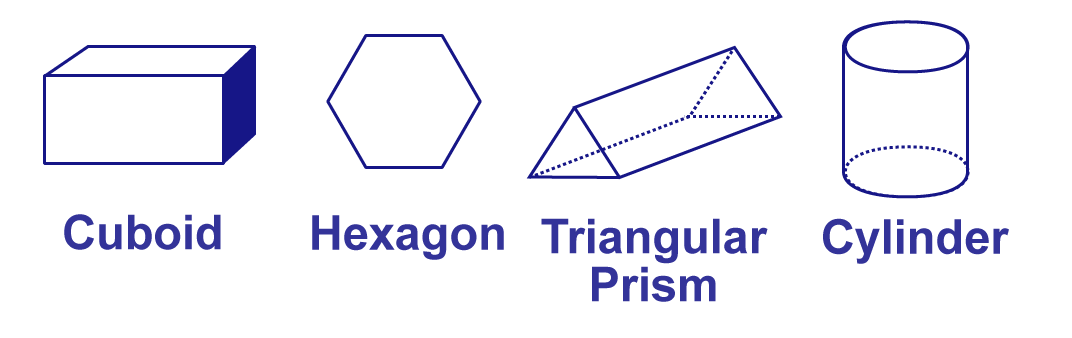
<style>
.page{position:relative;width:1072px;height:338px;background:#ffffff}
.page>*{position:absolute;margin:0}
.t1{font:48px "Arial-BoldMT";color:#333399}
.t2{font:48px/48px "Arial-BoldMT";color:#333399}
</style>
<div class="page">
<p class="t1" style="left:64px;top:214px;width:157px;height:36px">Cuboid</p>
<p class="t1" style="left:312px;top:215px;width:192px;height:45px">Hexagon</p>
<p class="t2" style="left:541px;top:218px;width:227px;height:84px;text-align:center">Triangular<br>Prism</p>
<p class="t1" style="left:823px;top:218px;width:186px;height:46px">Cylinder</p>
</div>
